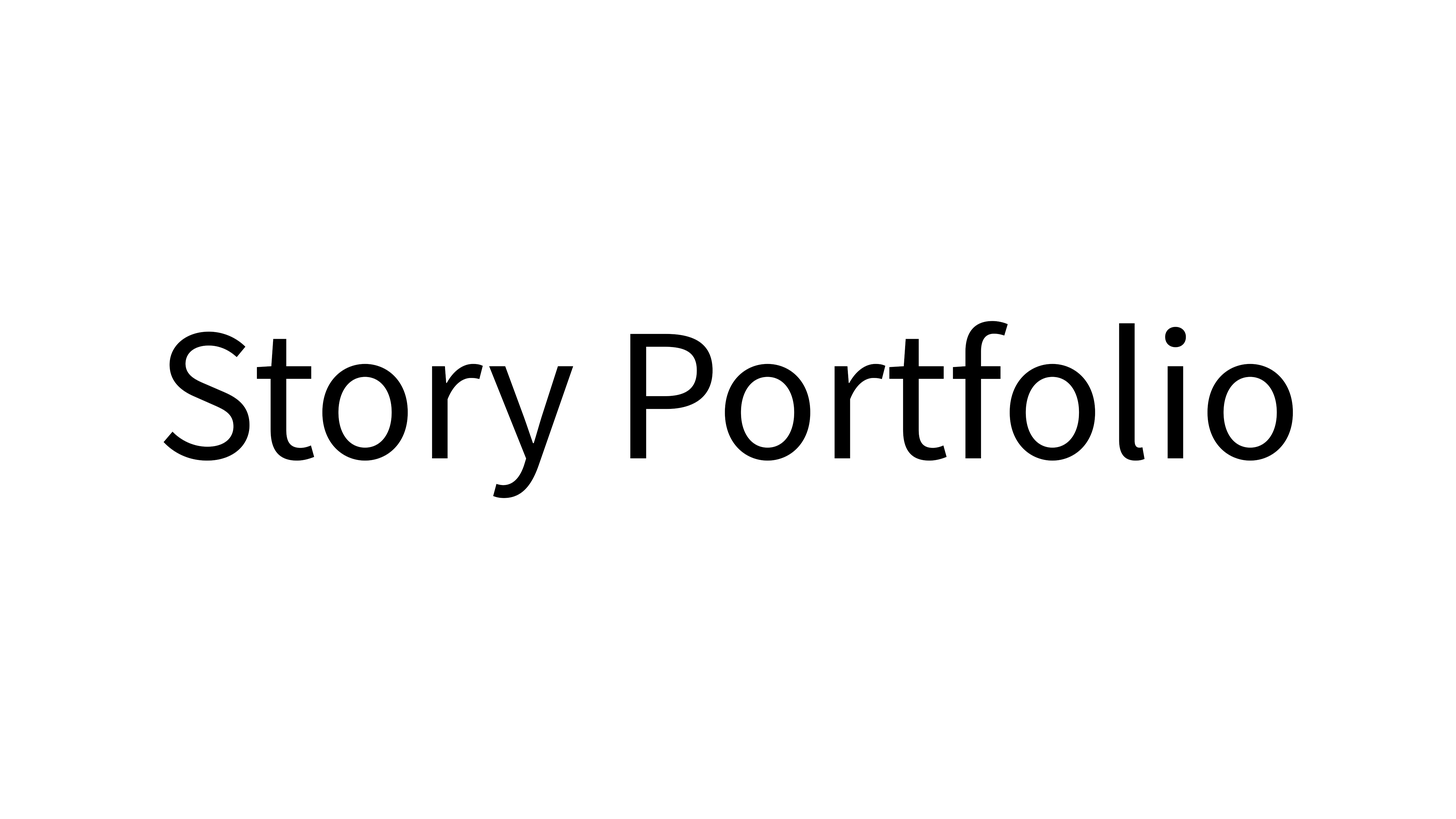
<style>
.page{position:relative;width:1456px;height:819px;background:#ffffff}
.page>*{position:absolute;margin:0}
.t1{font:189.6px "SourceSansRoman-Regular";color:#000000}
</style>
<div class="page">
<p class="t1" style="left:163px;top:321px;width:1130px;height:177px">Story Portfolio</p>
</div>
